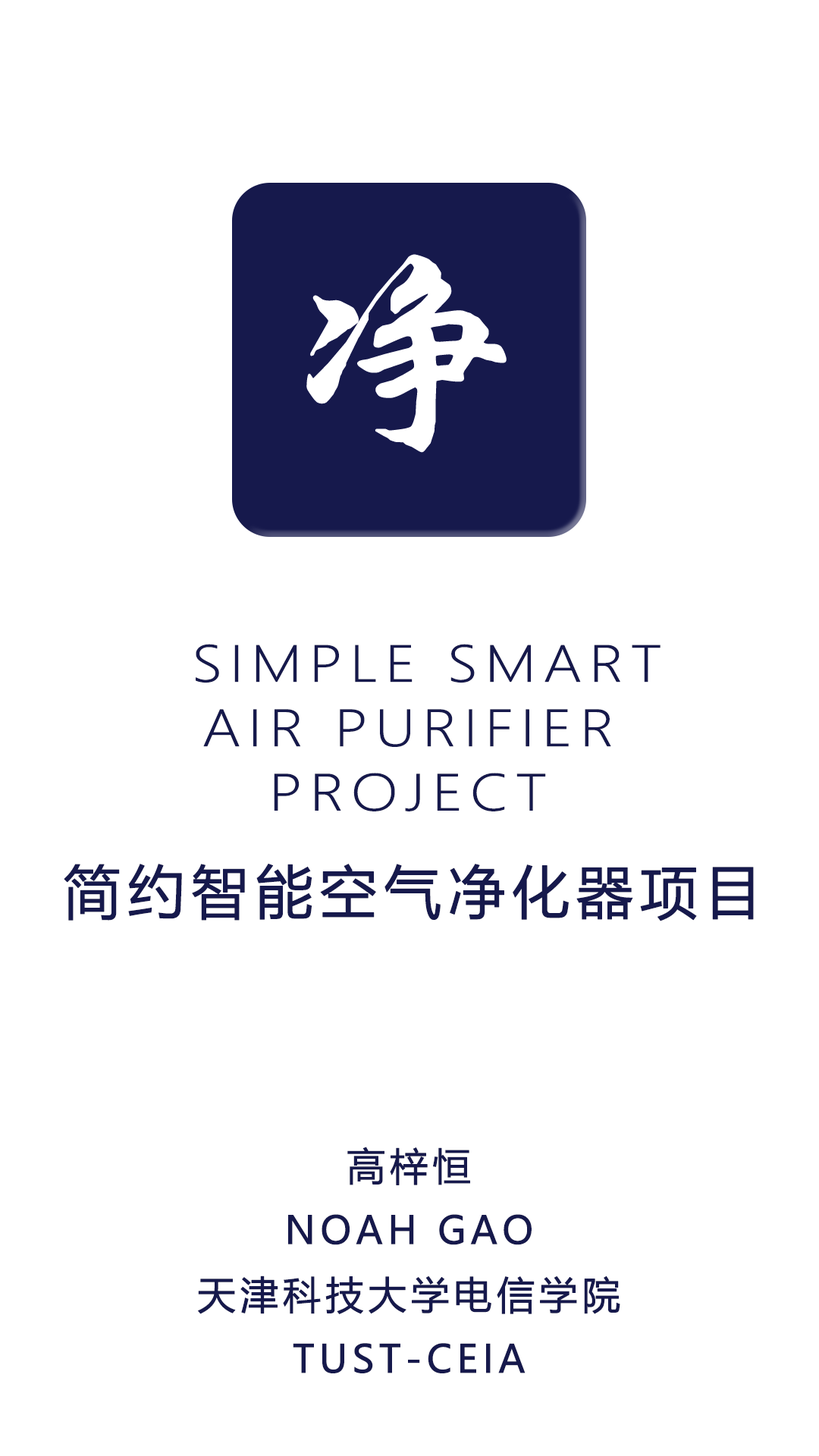
<style>
.page{position:relative;width:819px;height:1456px;background:#ffffff}
.page>*{position:absolute;margin:0}
.t1{font:48.3px/64.4px "MicrosoftYaHeiUILight";letter-spacing:0.1em;color:#16194c;text-transform:uppercase;font-weight:bold;scale:1.18 1}
.t2{font:48.3px/64.4px "MicrosoftYaHeiUILight";letter-spacing:0.1em;color:#ffffff;text-transform:uppercase;font-weight:bold;scale:1.18 1}
.t3{font:57.4px "MicrosoftYaHeiUI";letter-spacing:0.1em;color:#16194c;text-transform:uppercase;font-weight:bold}
.t4{font:38.3px/64.4px "MicrosoftYaHeiUI";letter-spacing:0.1em;color:#16194c;text-transform:uppercase;font-weight:bold}
</style>
<div class="page">
<p class="t1" style="left:158px;top:644px;width:502px;height:167px;text-align:center"><span class="t2">S</span>Simple SMART<br>AIR PURIFIER<br>pROJECT</p>
<p class="t3" style="left:64px;top:863px;width:690px;height:58px">简约智能空气净化器项目</p>
<p class="t4" style="left:198px;top:1147px;width:422px;height:226px;text-align:center">高梓恒<br>Noah gao<br>天津科技大学电信学院<br>TUST-CEIA</p>
</div>
